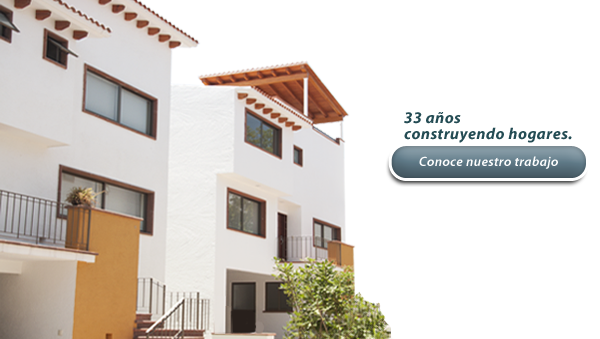
<style>
.page{position:relative;width:600px;height:339px;background:#ffffff}
.page>*{position:absolute;margin:0}
.t1{font:16px/15.6px "MyriadPro-BoldIt";letter-spacing:0.032em;color:#244c54}
.t2{font:16px/9.5px "MyriadPro-BoldIt";letter-spacing:0.032em;color:#244c54}
.t3{font:13.3px "MyriadPro-SemiboldIt";letter-spacing:0.032em;color:#fefefe}
</style>
<div class="page">
<p class="t1" style="left:404px;top:112px;width:168px;height:31px">33 años <br>construyendo hogares<span class="t2">.</span></p>
<p class="t3" style="left:419px;top:156px;width:139px;height:13px">Conoce nuestro trabajo</p>
</div>
